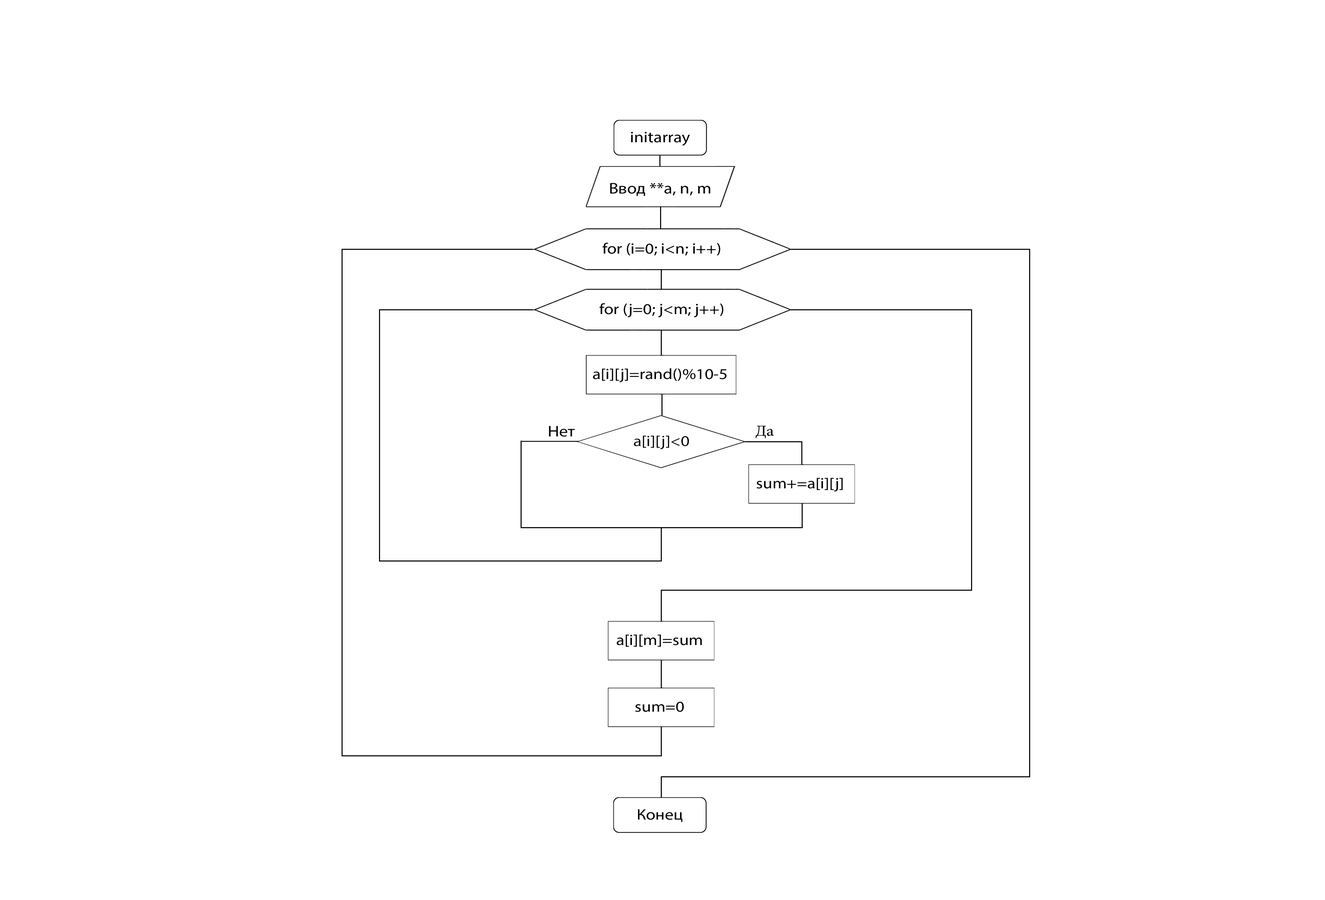
<style>
.page{position:relative;width:1325px;height:900px;background:#ffffff}
.page>*{position:absolute;margin:0}
.t1{font:15.4px "MyriadPro-Regular";color:#000000;scale:1.14 1}
.t2{font:15.1px "MyriadPro-Regular";color:#000000;scale:1.14 1}
.t3{font:15.4px "MyriadPro-Regular";color:#000000;scale:1.13 1}
</style>
<div class="page">
<p class="t1" style="left:631px;top:132px;width:59px;height:14px">initarray</p>
<p class="t1" style="left:610px;top:183px;width:100px;height:13px">Ввод **a, n, m</p>
<p class="t2" style="left:602px;top:243px;width:118px;height:13px">for (i=0; i&lt;n; i++)</p>
<p class="t2" style="left:599px;top:303px;width:124px;height:15px">for (j=0; j&lt;m; j++)</p>
<p class="t2" style="left:593px;top:368px;width:134px;height:14px">a[i][j]=rand()%10-5</p>
<p class="t3" style="left:549px;top:426px;width:26px;height:11px">Нет</p>
<p class="t2" style="left:634px;top:435px;width:55px;height:14px">a[i][j]&lt;0</p>
<p class="t2" style="left:756px;top:478px;width:87px;height:14px">sum+=a[i][j]</p>
<p class="t2" style="left:616px;top:634px;width:86px;height:13px">a[i][m]=sum</p>
<p class="t2" style="left:635px;top:702px;width:49px;height:10px">sum=0</p>
<p class="t2" style="left:638px;top:809px;width:44px;height:13px">Конец</p>
</div>
